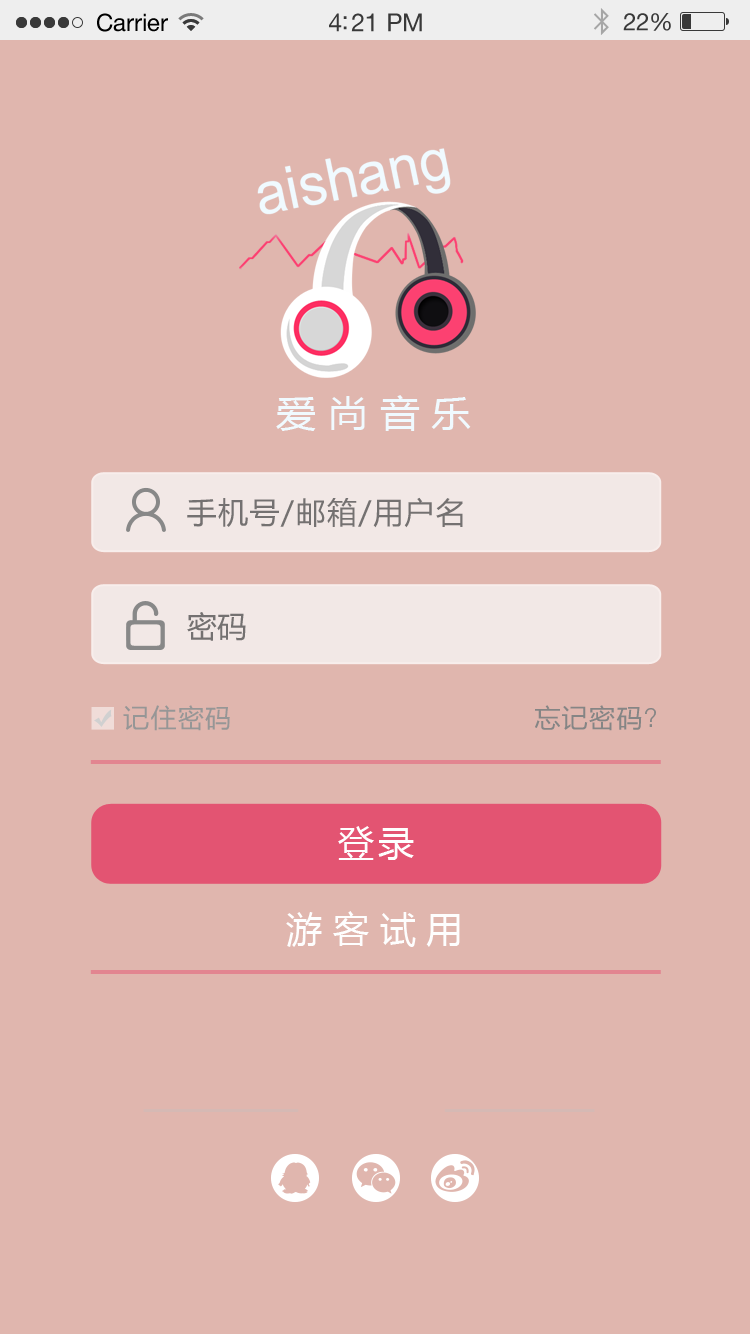
<style>
.page{position:relative;width:750px;height:1334px;background:#e0b6ae}
.page>*{position:absolute;margin:0}
.t1{font:24px "HelveticaNeue";color:#000000}
.t2{font:25px "HelveticaNeueLTPro-Roman";letter-spacing:-0.02em;color:#393939}
.t3{font:36.6px "MicrosoftYaHei";letter-spacing:0.3em;color:#f0faff;scale:1.09 1}
.t4{font:30px "MicrosoftYaHei";letter-spacing:0.05em;color:#747171}
.t5{font:30px "MicrosoftYaHei";color:#747171}
.t6{font:26px "MicrosoftYaHei";letter-spacing:0.05em;color:#969696}
.t7{font:26px "MicrosoftYaHei";letter-spacing:0.05em;color:#858585}
.t8{font:26px "HelveticaNeueLTPro-Lt";letter-spacing:0.05em;color:#858585}
.t9{font:36px "MicrosoftYaHei";letter-spacing:0.1em;color:#fefefe}
.t10{font:36px "MicrosoftYaHei";letter-spacing:0.3em;color:#fefefe}
</style>
<div class="page">
<p class="t1" style="left:97px;top:13px;width:71px;height:19px">Carrier</p>
<p class="t2" style="left:329px;top:13px;width:93px;height:19px">4:21 PM</p>
<p class="t3" style="left:276px;top:395px;width:195px;height:36px">爱尚音乐</p>
<p class="t4" style="left:187px;top:497px;width:276px;height:31px">手机号/邮箱/用户名</p>
<p class="t5" style="left:187px;top:612px;width:59px;height:29px">密码</p>
<p class="t6" style="left:123px;top:705px;width:107px;height:26px">记住密码</p>
<p class="t7" style="left:535px;top:705px;width:121px;height:26px">忘记密码<span class="t8">?</span></p>
<p class="t9" style="left:338px;top:826px;width:76px;height:34px">登录</p>
<p class="t10" style="left:286px;top:911px;width:174px;height:36px">游客试用</p>
</div>
